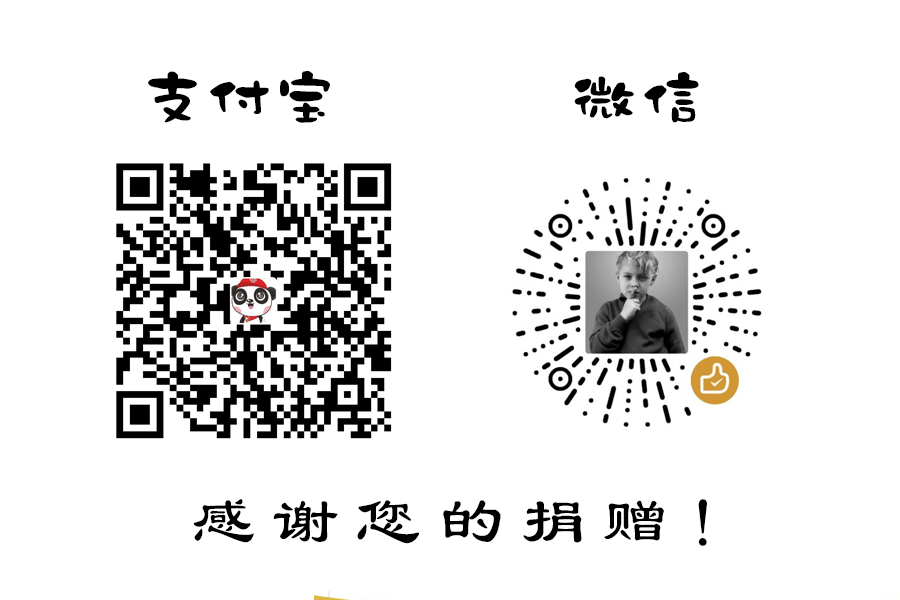
<style>
.page{position:relative;width:900px;height:600px;background:#ffffff}
.page>*{position:absolute;margin:0}
.t1{font:66.7px "DFMo-W9-WINP-BF";color:#000000}
.t2{font:66.7px "LiSu";letter-spacing:0.22em;color:#000000}
</style>
<div class="page">
<p class="t1" style="left:148px;top:71px;width:182px;height:52px">支付宝</p>
<p class="t1" style="left:574px;top:72px;width:125px;height:51px">微信</p>
<p class="t2" style="left:193px;top:499px;width:514px;height:47px">感谢您的捐赠！</p>
</div>
